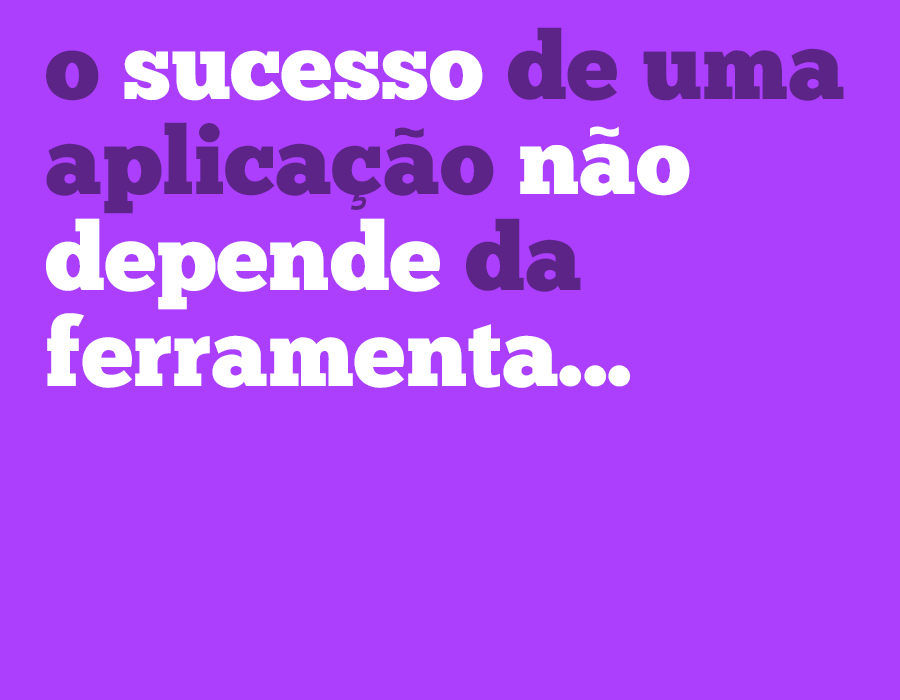
<style>
.page{position:relative;width:900px;height:700px;background:#ac3ffe}
.page>*{position:absolute;margin:0}
.t1{font:94.9px/95.9px "ChunkFive-Roman";color:#5d2488}
.t2{font:94.9px/95.9px "ChunkFive-Roman";color:#ffffff}
.t3{font:72.7px "ChunkFive-Roman";color:#ffffff}
.t4{font:72.7px "ChunkFive-Roman";color:#5d2488}
</style>
<div class="page">
<p class="t1" style="left:46px;top:27px;width:798px;height:361px">o <span class="t2">sucesso </span>de uma <br>aplicaçao <span class="t2">nao<br>depende</span> da<br><span class="t2">ferramenta...</span></p>
<p class="t3" style="left:590px;top:126px;width:29px;height:11px">~</p>
<p class="t4" style="left:395px;top:127px;width:29px;height:11px">~</p>
</div>
